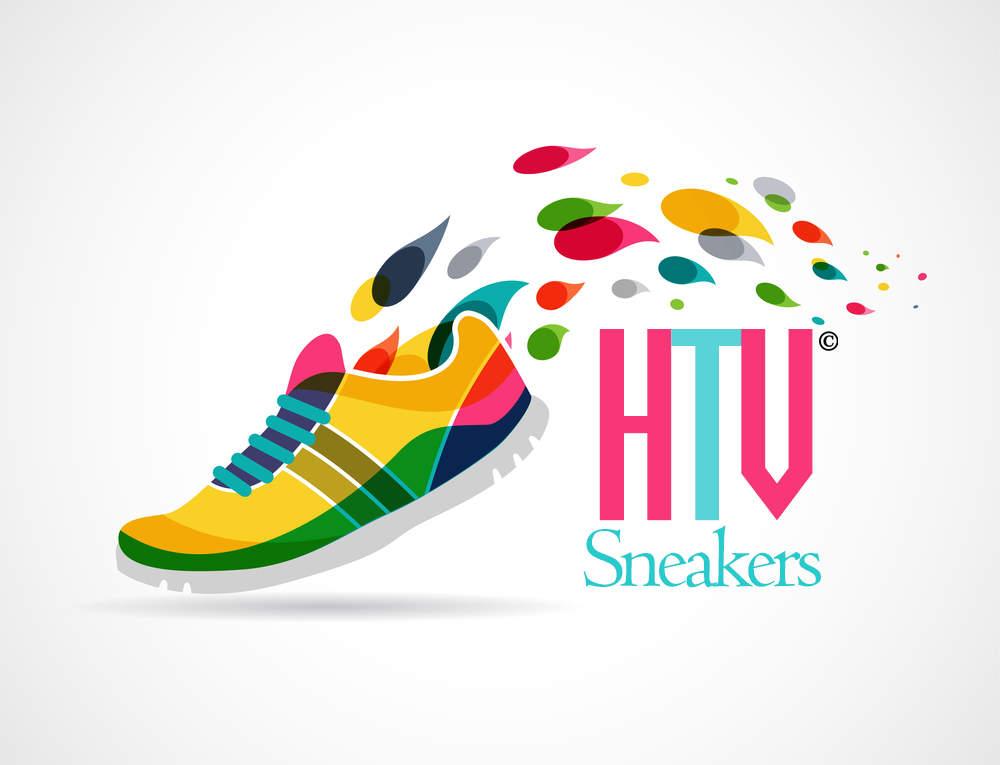
<style>
.page{position:relative;width:1000px;height:765px}
.page>*{position:absolute;margin:0}
.t1{font:250px "UVNHaiBaTrung";letter-spacing:-0.06em;color:#f83778}
.t2{font:150px "UVNHaiBaTrung";letter-spacing:-0.06em;color:#f83778}
.t3{font:250px "UVNHaiBaTrung";letter-spacing:-0.06em;color:#59d4d6}
.t4{font:90px "Centaur";letter-spacing:-0.06em;color:#28cacc}
</style>
<div class="page">
<p class="t1" style="left:599px;top:329px;width:214px;height:192px"><span class="t2"><br><br><br><br><br><br><br><br><br><br><br><br><br><br><br><br><br><br></span>H<span class="t3">T</span>V</p>
<p class="t4" style="left:583px;top:525px;width:238px;height:63px">Sneakers</p>
</div>
